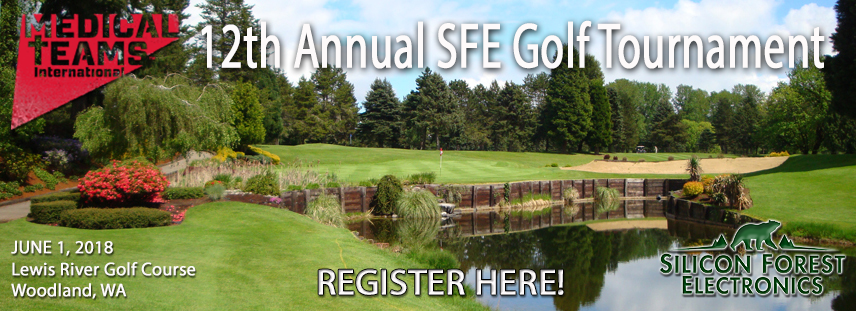
<style>
.page{position:relative;width:856px;height:311px}
.page>*{position:absolute;margin:0}
.t1{font:64.2px "MyriadPro-Regular";color:#fdfafa;font-weight:bold;scale:0.66 1}
.t2{font:18px "MyriadPro-Regular";color:#fdfafa;font-weight:bold}
.t3{font:36px "MyriadPro-Regular";color:#fdfafa;font-weight:bold}
</style>
<div class="page">
<p class="t1" style="left:201px;top:20px;width:624px;height:49px">12th Annual SFE Golf Tournament</p>
<p class="t2" style="left:11px;top:240px;width:185px;height:59px">JUNE 1, 2018<br>Lewis River Golf Course<br>Woodland, WA</p>
<p class="t3" style="left:318px;top:269px;width:246px;height:26px">REGISTER HERE!</p>
</div>
